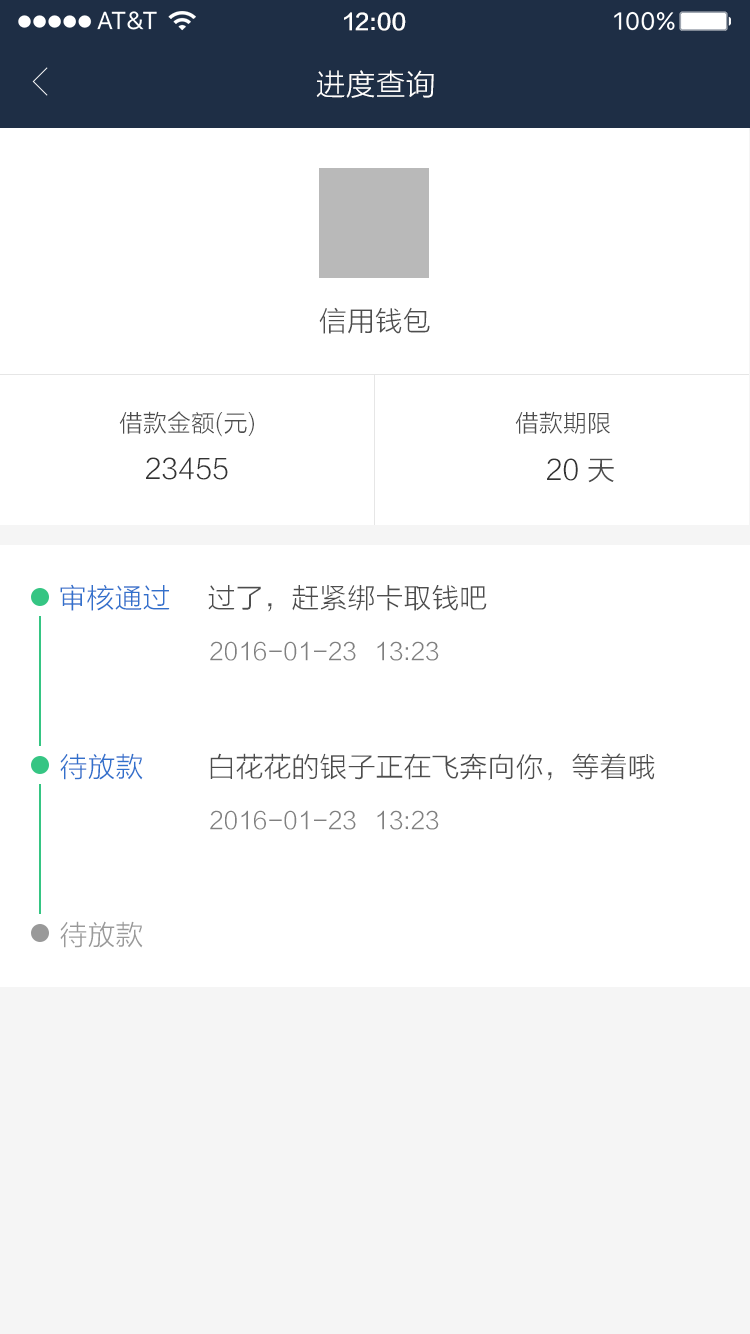
<style>
.page{position:relative;width:750px;height:1334px;background:#ffffff}
.page>*{position:absolute;margin:0}
.t1{font:22px "FZLTZHK--GBK1-0";color:#ffffff}
.t2{font:30px "FZLTXHK";color:#ffffff}
.t3{font:28px "FZLTXHK";color:#4d4d4d}
.t4{font:24px "FZLTXHK";color:#4d4d4d}
.t5{font:28px "FZLTXHK";color:#333333}
.t6{font:28px "FZLTXHK";color:#3170cc}
.t7{font:24px "FZLTXHK";color:#808080}
.t8{font:28px "FZLTXHK";color:#999999}
</style>
<div class="page">
<p class="t1" style="left:344px;top:12px;width:62px;height:19px">12:00</p>
<p class="t2" style="left:316px;top:70px;width:118px;height:28px">进度查询</p>
<p class="t3" style="left:319px;top:307px;width:111px;height:27px">信用钱包</p>
<p class="t4" style="left:119px;top:411px;width:135px;height:26px">借款金额(元)</p>
<p class="t4" style="left:515px;top:411px;width:95px;height:23px">借款期限</p>
<p class="t5" style="left:146px;top:457px;width:82px;height:23px">23455</p>
<p class="t5" style="left:547px;top:458px;width:31px;height:23px">20</p>
<p class="t3" style="left:588px;top:458px;width:26px;height:25px">天</p>
<p class="t6" style="left:60px;top:584px;width:110px;height:27px">审核通过</p>
<p class="t3" style="left:208px;top:585px;width:279px;height:27px">过了，赶紧绑卡取钱吧</p>
<p class="t7" style="left:210px;top:641px;width:146px;height:20px">2016-01-23</p>
<p class="t7" style="left:377px;top:641px;width:62px;height:20px">13:23</p>
<p class="t6" style="left:60px;top:753px;width:83px;height:27px">待放款</p>
<p class="t3" style="left:210px;top:753px;width:445px;height:28px">白花花的银子正在飞奔向你，等着哦</p>
<p class="t7" style="left:210px;top:810px;width:146px;height:20px">2016-01-23</p>
<p class="t7" style="left:377px;top:810px;width:62px;height:20px">13:23</p>
<p class="t8" style="left:60px;top:921px;width:83px;height:27px">待放款</p>
</div>
